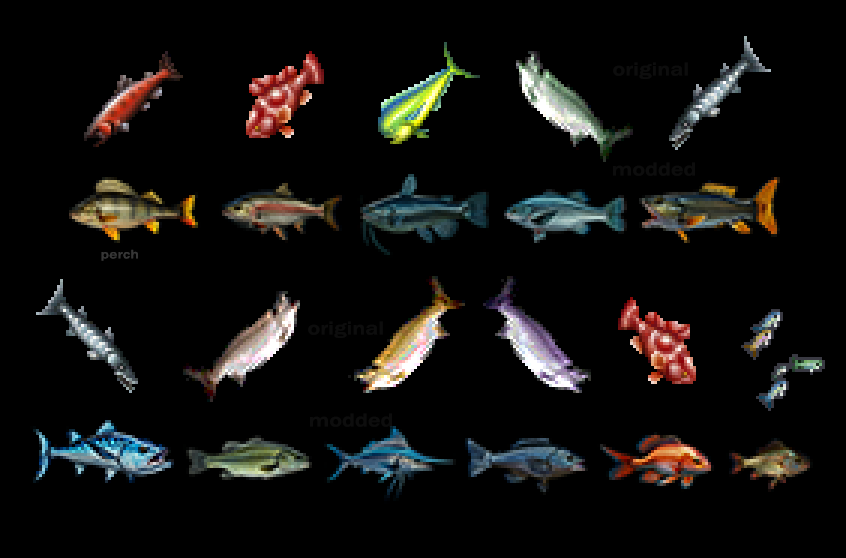
<style>
.page{position:relative;width:846px;height:558px;background:#000000}
.page>*{position:absolute;margin:0}
.t1{font:19.2px "FranklinGothic-Medium";color:#0d0d0d;scale:1.25 1}
.t2{font:12.8px "FranklinGothic-Medium";color:#363636;scale:1.25 1}
</style>
<div class="page">
<p class="t1" style="left:613px;top:62px;width:75px;height:17px">original</p>
<p class="t1" style="left:613px;top:162px;width:82px;height:14px">modded</p>
<p class="t2" style="left:101px;top:249px;width:37px;height:12px">perch</p>
<p class="t1" style="left:308px;top:321px;width:75px;height:17px">original</p>
<p class="t1" style="left:310px;top:413px;width:82px;height:14px">modded</p>
</div>
